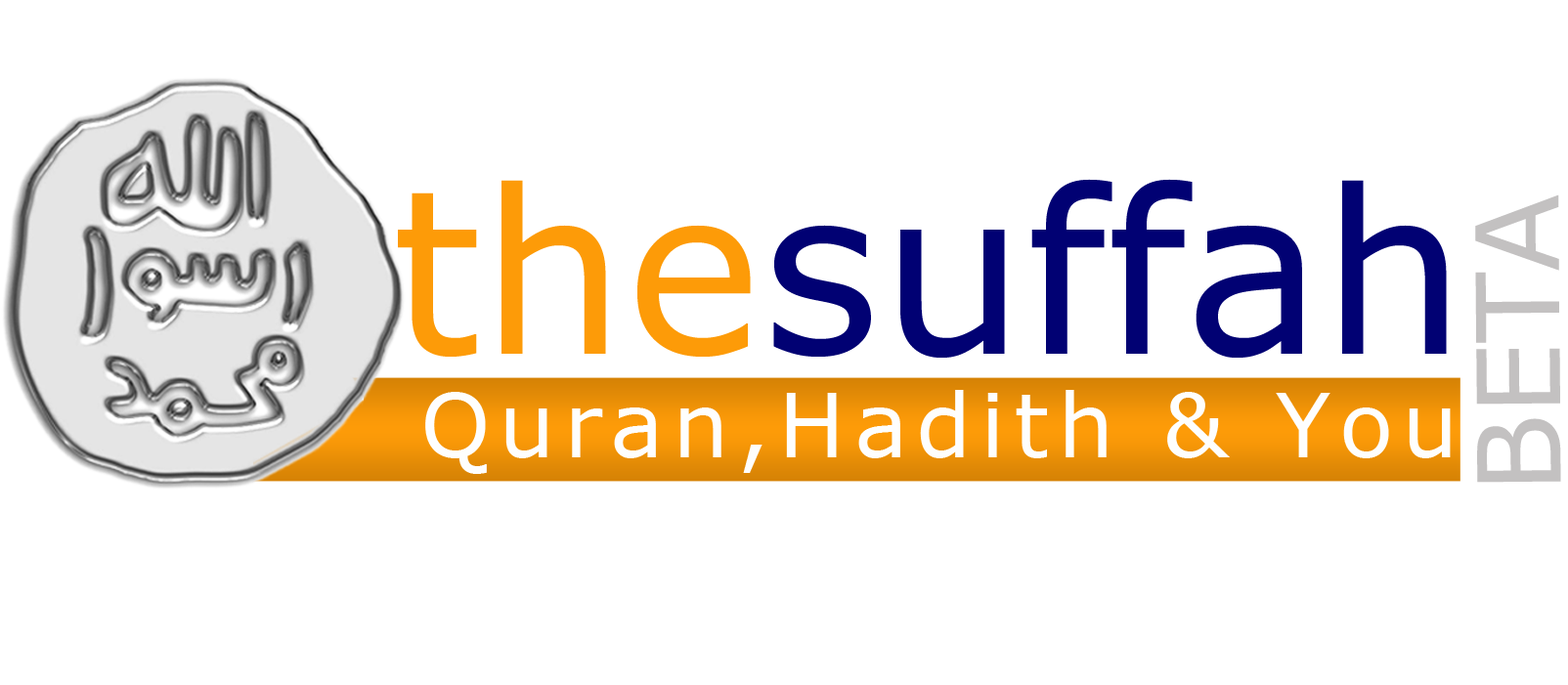
<style>
.page{position:relative;width:1568px;height:685px;background:#ffffff}
.page>*{position:absolute;margin:0}
.t1{font:228.1px "Verdana";color:#010173}
.t2{font:228.1px "Verdana";color:#fd9b08}
.t3{font:114px "Verdana";color:#c3c1c1}
.t4{font:88.7px "Verdana";letter-spacing:0.1em;color:#fefefd}
</style>
<div class="page">
<p class="t1" style="left:398px;top:179px;width:1049px;height:179px"><span class="t2">the</span>suffah</p>
<p class="t3" style="left:1475px;top:195px;width:86px;height:288px;rotate:-90deg">BETA</p>
<p class="t4" style="left:425px;top:390px;width:1026px;height:84px">Quran,Hadith &amp; You</p>
</div>
